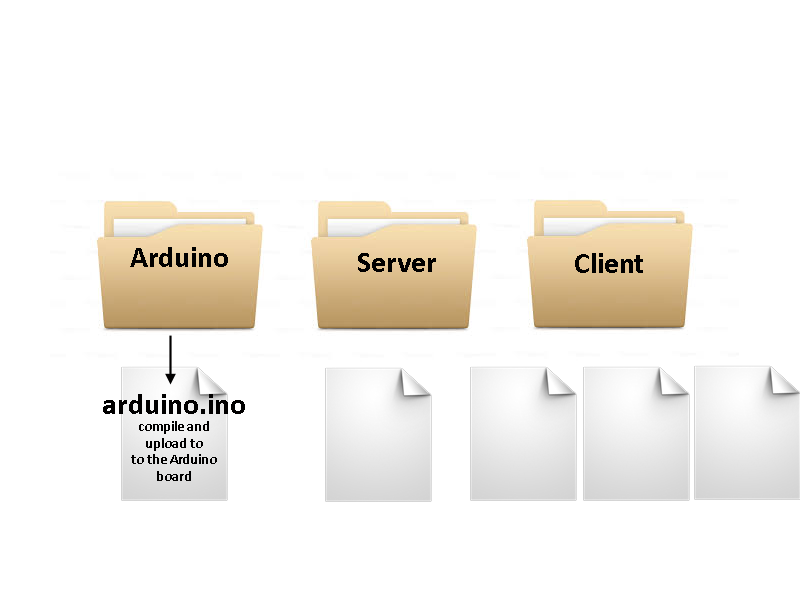
<style>
.page{position:relative;width:800px;height:600px;background:#ffffff}
.page>*{position:absolute;margin:0}
.t1{font:30px "Calibri-Bold";color:#010000}
.t2{font:24px "Calibri-Bold";color:#010000}
.t3{font:14px "Calibri-Bold";color:#010000}
</style>
<div class="page">
<p class="t1" style="left:130px;top:247px;width:98px;height:20px"><span class="t2"> </span>Arduino</p>
<p class="t1" style="left:358px;top:253px;width:78px;height:19px">Server</p>
<p class="t1" style="left:575px;top:253px;width:68px;height:20px">Client</p>
<p class="t3" style="left:103px;top:394px;width:142px;height:87px;text-align:center"><span class="t1">arduino.ino<br></span>compile and <br>upload to<br>to the Arduino <br>board</p>
</div>
